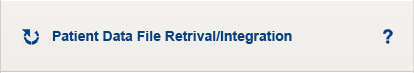
<style>
.page{position:relative;width:414px;height:73px;background:#f0efeb}
.page>*{position:absolute;margin:0}
.t1{font:14px "Arial-BoldMT";color:#054082}
</style>
<div class="page">
<p class="t1" style="left:52px;top:31px;width:240px;height:13px">Patient Data File Retrival/Integration</p>
</div>
